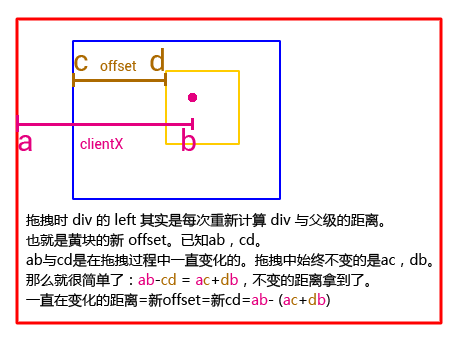
<style>
.page{position:relative;width:454px;height:340px;background:#ffffff}
.page>*{position:absolute;margin:0}
.t1{font:30px "Roboto-Regular";color:#ac6a00}
.t2{font:14px "Roboto-Regular";color:#ac6a00}
.t3{font:30px "Roboto-Regular";color:#e4007f}
.t4{font:14px "Roboto-Regular";color:#e4007f}
.t5{font:14px/20px "MicrosoftYaHei";color:#000000}
.t6{font:14px/20px "MicrosoftYaHei";color:#e4007f}
.t7{font:14px/20px "MicrosoftYaHei";color:#ac6a00}
</style>
<div class="page">
<p class="t1" style="left:150px;top:48px;width:14px;height:23px">d</p>
<p class="t1" style="left:74px;top:55px;width:14px;height:16px">c</p>
<p class="t2" style="left:100px;top:60px;width:37px;height:11px">offset</p>
<p class="t3" style="left:18px;top:135px;width:14px;height:16px">a</p>
<p class="t3" style="left:182px;top:128px;width:14px;height:23px">b</p>
<p class="t4" style="left:80px;top:138px;width:43px;height:11px">clientX</p>
<p class="t5" style="left:26px;top:213px;width:406px;height:95px">拖拽时 div 的 left 其实是每次重新计算 div 与父级的距离。<br>也就是黄块的新 offset。已知ab，cd。<br>ab与cd是在拖拽过程中一直变化的。拖拽中始终不变的是ac，db。<br>那么就很简单了：<span class="t6">ab</span>-<span class="t7">cd </span>= <span class="t6">a</span><span class="t7">c</span>+<span class="t7">d</span><span class="t6">b</span>，不变的距离拿到了。<br>一直在变化的距离=新offset=新cd=<span class="t6">ab</span>- (<span class="t6">a</span><span class="t7">c</span>+<span class="t7">d</span><span class="t6">b</span>)</p>
</div>
